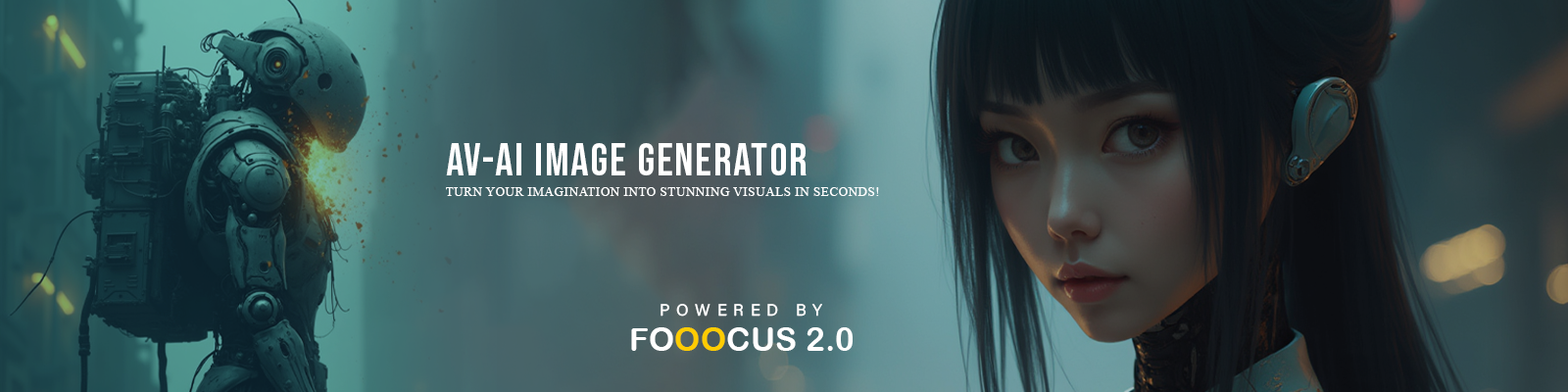
<style>
.page{position:relative;width:1568px;height:392px}
.page>*{position:absolute;margin:0}
.t1{font:44.9px "BebasNeue-Regular";letter-spacing:0.04em;color:#ffffff;text-transform:uppercase}
.t2{font:12.2px "TimesNewRomanPSMT";letter-spacing:0.04em;color:#ffffff;text-transform:uppercase}
.t3{font:16.3px "AcuminConcept-Regular";letter-spacing:0.4em;color:#ffffff;text-transform:uppercase}
.t4{font:32.7px "ArialRoundedMTBold";color:#ffffff;text-transform:uppercase}
.t5{font:32.7px "ArialRoundedMTBold";color:#ffcc00;text-transform:uppercase}
</style>
<div class="page">
<p class="t1" style="left:446px;top:143px;width:361px;height:32px">AV-AI Image Generator</p>
<p class="t2" style="left:446px;top:187px;width:433px;height:9px">Turn Your Imagination into Stunning Visuals in Seconds!</p>
<p class="t3" style="left:661px;top:304px;width:161px;height:13px">powered by</p>
<p class="t4" style="left:631px;top:327px;width:222px;height:24px">fo<span class="t5">oo</span>cus 2.0</p>
</div>
